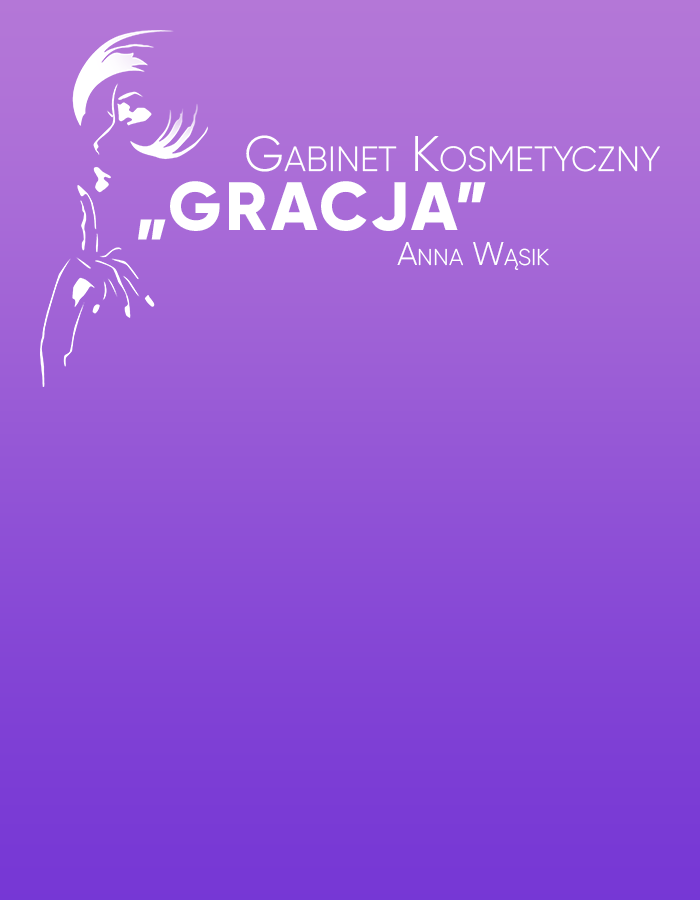
<style>
.page{position:relative;width:700px;height:900px}
.page>*{position:absolute;margin:0}
.t1{font:50px "Gilroy-Light";color:#ffffff;font-variant:small-caps}
.t2{font:68.3px "Gilroy-ExtraBold";letter-spacing:0.05em;color:#ffffff;text-transform:uppercase}
.t3{font:32.7px "Gilroy-Light";color:#ffffff;font-variant:small-caps}
</style>
<div class="page">
<p class="t1" style="left:246px;top:135px;width:414px;height:37px">Gabinet Kosmetyczny</p>
<p class="t2" style="left:138px;top:181px;width:348px;height:59px">„Gracja”</p>
<p class="t3" style="left:397px;top:242px;width:152px;height:28px">Anna Wąsik</p>
</div>
